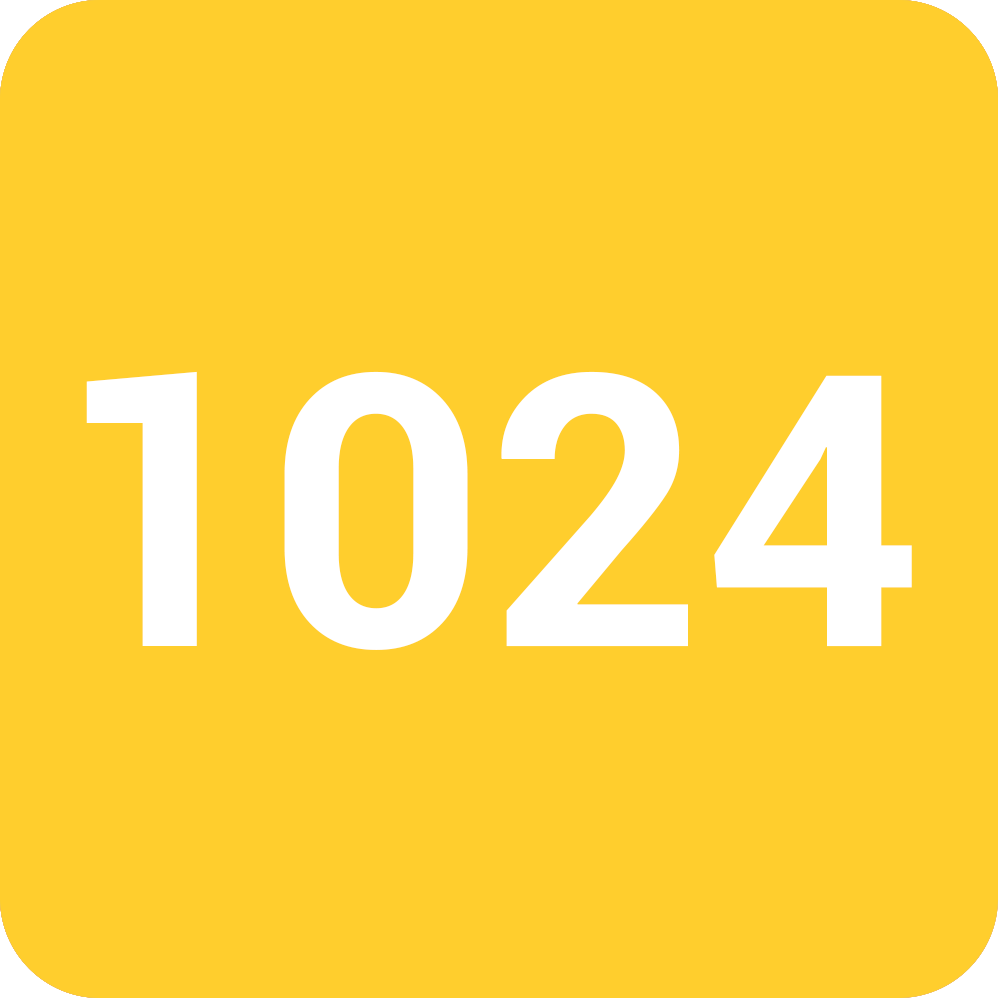
<style>
.page{position:relative;width:998px;height:998px;background:#ffce2d}
.page>*{position:absolute;margin:0}
.t1{font:380px "Roboto-Bold";color:#ffffff}
</style>
<div class="page">
<p class="t1" style="left:86px;top:371px;width:826px;height:279px">1024</p>
</div>
